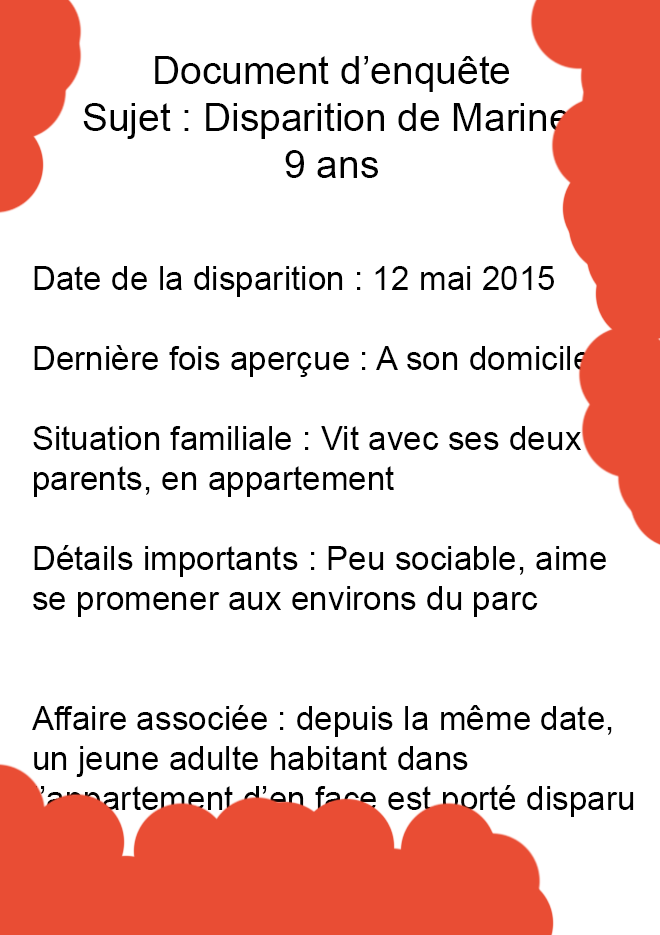
<style>
.page{position:relative;width:660px;height:935px;background:#ffffff}
.page>*{position:absolute;margin:0}
.t1{font:38.9px "ArialMT";color:#000000}
.t2{font:33.3px "ArialMT";color:#000000}
</style>
<div class="page">
<p class="t1" style="left:83px;top:56px;width:495px;height:122px;text-align:center">Document d’enquête<br>Sujet : Disparition de Marine, <br>9 ans</p>
<p class="t2" style="left:32px;top:266px;width:602px;height:551px">Date de la disparition : 12 mai 2015<br><br>Dernière fois aperçue : A son domicile<br><br>Situation familiale : Vit avec ses deux parents, en appartement<br><br>Détails importants : Peu sociable, aime se promener aux environs du parc<br><br><br>Affaire associée : depuis la même date, un jeune adulte habitant dans l’appartement d’en face est porté disparu</p>
</div>
